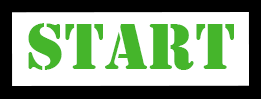
<style>
.page{position:relative;width:261px;height:99px;background:#ffffff}
.page>*{position:absolute;margin:0}
.t1{font:68.5px "Stencil";color:#45b52b}
</style>
<div class="page">
<p class="t1" style="left:28px;top:23px;width:206px;height:47px">START</p>
</div>
